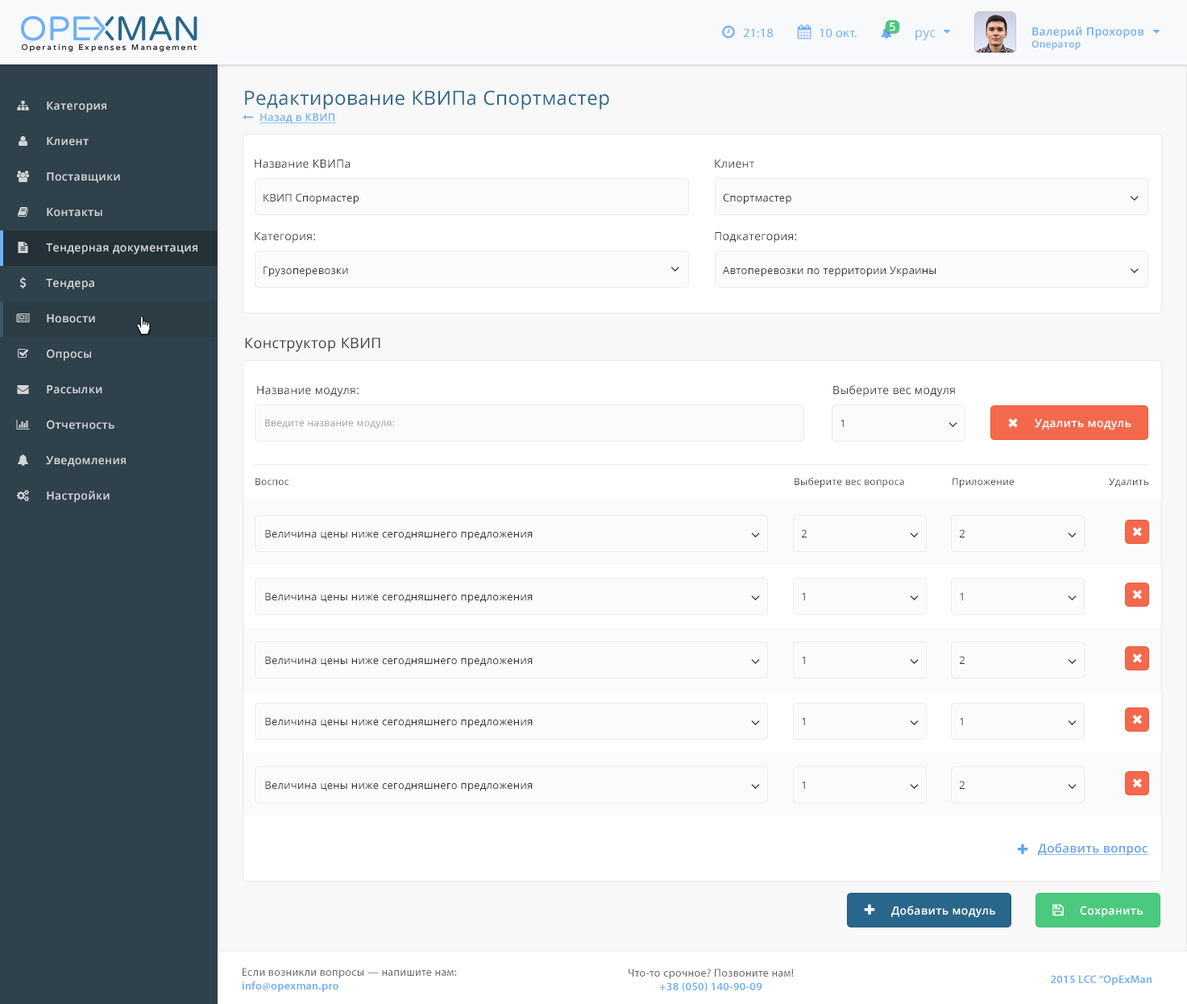
<style>
.page{position:relative;width:1187px;height:1004px;background:#ffffff}
.page>*{position:absolute;margin:0}
.t1{font:12.8px "MyriadPro-Regular";letter-spacing:0.025em;color:#6faff8}
.t2{font:11.2px "OpenSans-Semibold";letter-spacing:0.025em;color:#ffffff}
.t3{font:12.8px "OpenSans";letter-spacing:0.025em;color:#6eaff8}
.t4{font:11.2px "OpenSans-Semibold";letter-spacing:0.025em;color:#6eaef7}
.t5{font:9.6px "OpenSans-Semibold";letter-spacing:0.025em;color:#6eaef7}
.t6{font:11.2px "OpenSans-Semibold";letter-spacing:0.025em;color:#d2d5d7}
.t7{font:19.3px "OpenSans";letter-spacing:0.025em;color:#29658b}
.t8{font:10.4px "OpenSans-Semibold";letter-spacing:0.025em;color:#6faff8;text-decoration:underline}
.t9{font:11.2px "OpenSans";letter-spacing:0.025em;color:#373838}
.t10{font:10.4px "OpenSans";letter-spacing:0.025em;color:#333333}
.t11{font:14.5px "OpenSans";letter-spacing:0.025em;color:#373838}
.t12{font:9.6px "OpenSans";letter-spacing:0.025em;color:#999999}
.t13{font:10.4px "OpenSans";letter-spacing:0.025em}
.t14{font:9.6px "OpenSans";letter-spacing:0.025em;color:#373838}
.t15{font:12px "OpenSans-Semibold";letter-spacing:0.025em;color:#62a3ed;text-decoration:underline}
.t16{font:11.2px "MyriadPro-Regular";letter-spacing:0.025em;color:#696969}
.t17{font:11.2px "MyriadPro-Semibold";letter-spacing:0.025em;color:#6eaef8}
</style>
<div class="page">
<p class="t1" style="left:743px;top:28px;width:31px;height:10px">21:18</p>
<p class="t1" style="left:820px;top:28px;width:37px;height:10px">10 окт.</p>
<p class="t2" style="left:890px;top:23px;width:6px;height:8px">5</p>
<p class="t3" style="left:916px;top:30px;width:20px;height:10px">рус</p>
<p class="t4" style="left:1032px;top:27px;width:113px;height:23px">Валерий Прохоров<br><span class="t5">Оператор</span></p>
<p class="t6" style="left:47px;top:102px;width:59px;height:11px">Категория</p>
<p class="t7" style="left:245px;top:90px;width:364px;height:20px">Редактирование КВИПa Спортмастер</p>
<p class="t8" style="left:260px;top:113px;width:76px;height:10px">Назад в КВИП</p>
<p class="t6" style="left:47px;top:137px;width:42px;height:9px">Клиент</p>
<p class="t9" style="left:255px;top:160px;width:95px;height:8px">Название КВИПа</p>
<p class="t9" style="left:715px;top:160px;width:39px;height:8px">Клиент</p>
<p class="t6" style="left:47px;top:172px;width:73px;height:11px">Поставщики</p>
<p class="t10" style="left:264px;top:193px;width:95px;height:11px">КВИП Спормастер</p>
<p class="t10" style="left:723px;top:193px;width:69px;height:11px">Спортмастер</p>
<p class="t6" style="left:47px;top:208px;width:55px;height:9px">Контакты</p>
<p class="t9" style="left:255px;top:232px;width:60px;height:11px">Категория:</p>
<p class="t9" style="left:715px;top:232px;width:82px;height:11px">Подкатегория:</p>
<p class="t6" style="left:46px;top:243px;width:151px;height:12px">Тендерная документация</p>
<p class="t10" style="left:264px;top:266px;width:84px;height:10px">Грузоперевозки</p>
<p class="t10" style="left:723px;top:266px;width:214px;height:10px">Автоперевозки по территории Украины</p>
<p class="t6" style="left:46px;top:279px;width:48px;height:11px">Тендера</p>
<p class="t6" style="left:47px;top:314px;width:48px;height:9px">Новости</p>
<p class="t11" style="left:245px;top:338px;width:135px;height:14px">Конструктор КВИП</p>
<p class="t6" style="left:47px;top:349px;width:44px;height:12px">Опросы</p>
<p class="t6" style="left:47px;top:385px;width:55px;height:9px">Рассылки</p>
<p class="t9" style="left:257px;top:386px;width:102px;height:11px">Название модуля:</p>
<p class="t9" style="left:833px;top:385px;width:122px;height:12px">Выберите вес модуля</p>
<p class="t6" style="left:47px;top:420px;width:67px;height:10px">Отчетность</p>
<p class="t12" style="left:265px;top:419px;width:129px;height:10px">Введите название модуля:</p>
<p class="t13" style="left:841px;top:419px;width:3px;height:8px">1</p>
<p class="t2" style="left:1035px;top:419px;width:97px;height:11px">Удалить модуль</p>
<p class="t6" style="left:46px;top:456px;width:80px;height:11px">Уведомления</p>
<p class="t14" style="left:256px;top:478px;width:33px;height:7px">Воспос</p>
<p class="t14" style="left:795px;top:478px;width:109px;height:10px">Выберите вес вопроса</p>
<p class="t14" style="left:953px;top:478px;width:61px;height:10px">Приложение</p>
<p class="t14" style="left:1109px;top:478px;width:40px;height:10px">Удалить</p>
<p class="t6" style="left:47px;top:491px;width:63px;height:12px">Настройки</p>
<p class="t10" style="left:265px;top:530px;width:268px;height:10px">Величина цены ниже сегодняшнего предложения</p>
<p class="t10" style="left:802px;top:530px;width:5px;height:8px">2</p>
<p class="t10" style="left:960px;top:530px;width:5px;height:8px">2</p>
<p class="t10" style="left:265px;top:592px;width:268px;height:11px">Величина цены ниже сегодняшнего предложения</p>
<p class="t13" style="left:802px;top:592px;width:3px;height:8px">1</p>
<p class="t13" style="left:960px;top:592px;width:3px;height:8px">1</p>
<p class="t10" style="left:265px;top:656px;width:268px;height:11px">Величина цены ниже сегодняшнего предложения</p>
<p class="t13" style="left:802px;top:656px;width:3px;height:8px">1</p>
<p class="t10" style="left:960px;top:656px;width:5px;height:8px">2</p>
<p class="t10" style="left:265px;top:717px;width:268px;height:11px">Величина цены ниже сегодняшнего предложения</p>
<p class="t13" style="left:802px;top:717px;width:3px;height:8px">1</p>
<p class="t13" style="left:960px;top:717px;width:3px;height:8px">1</p>
<p class="t10" style="left:265px;top:781px;width:268px;height:11px">Величина цены ниже сегодняшнего предложения</p>
<p class="t13" style="left:802px;top:781px;width:3px;height:8px">1</p>
<p class="t10" style="left:960px;top:781px;width:5px;height:8px">2</p>
<p class="t15" style="left:1038px;top:843px;width:111px;height:13px">Добавить вопрос</p>
<p class="t2" style="left:891px;top:906px;width:104px;height:12px">Добавить модуль</p>
<p class="t2" style="left:1080px;top:906px;width:63px;height:12px">Сохранить</p>
<p class="t16" style="left:242px;top:968px;width:215px;height:24px">Если возникли вопросы — напишите нам:<br><span class="t17">info@opexman.pro</span></p>
<p class="t16" style="left:629px;top:969px;width:165px;height:23px;text-align:center">Что-то срочное? Позвоните нам!<br><span class="t17">+38 (050) 140-90-09</span></p>
<p class="t17" style="left:1051px;top:975px;width:101px;height:11px">2015 LCC “OpExMan</p>
</div>
